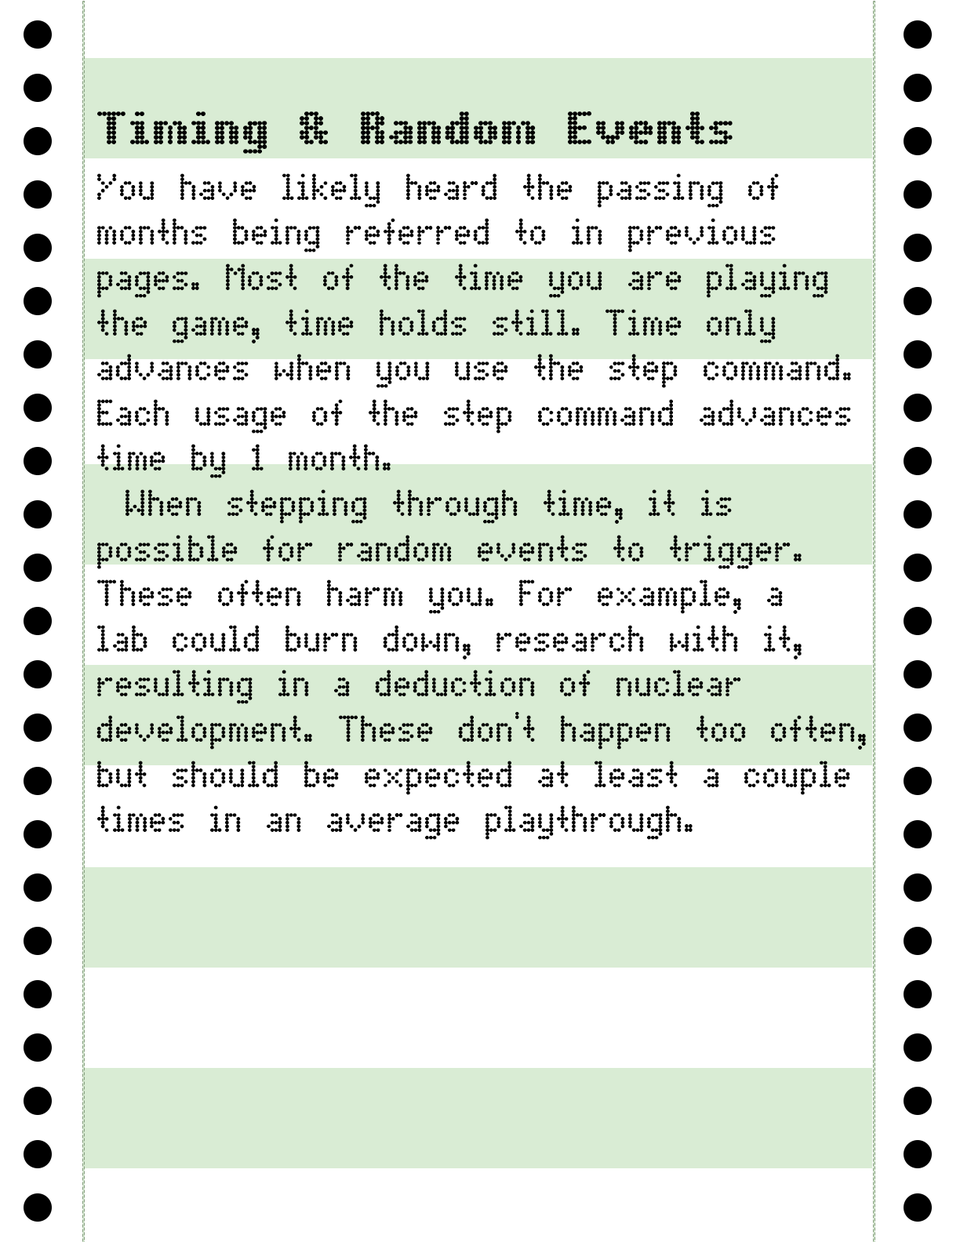
<style>
.page{position:relative;width:960px;height:1242px;background:#ffffff}
.page>*{position:absolute;margin:0}
.t1{font:47.1px "DotMatrixBold";color:#000000}
.t2{font:37.6px "DotMatrix";color:#000000}
</style>
<div class="page">
<p class="t1" style="left:97px;top:111px;width:635px;height:43px">Timing &amp; Random Events</p>
<p class="t2" style="left:96px;top:173px;width:770px;height:667px">You have likely heard the passing of<br>months being referred to in previous<br>pages. Most of the time you are playing<br>the game, time holds still. Time only<br>advances when you use the step command.<br>Each usage of the step command advances<br>time by 1 month.<br> When stepping through time, it is<br>possible for random events to trigger.<br>These often harm you. For example, a<br>lab could burn down, research with it,<br>resulting in a deduction of nuclear<br>development. These don't happen too often,<br>but should be expected at least a couple<br>times in an average playthrough.</p>
</div>
